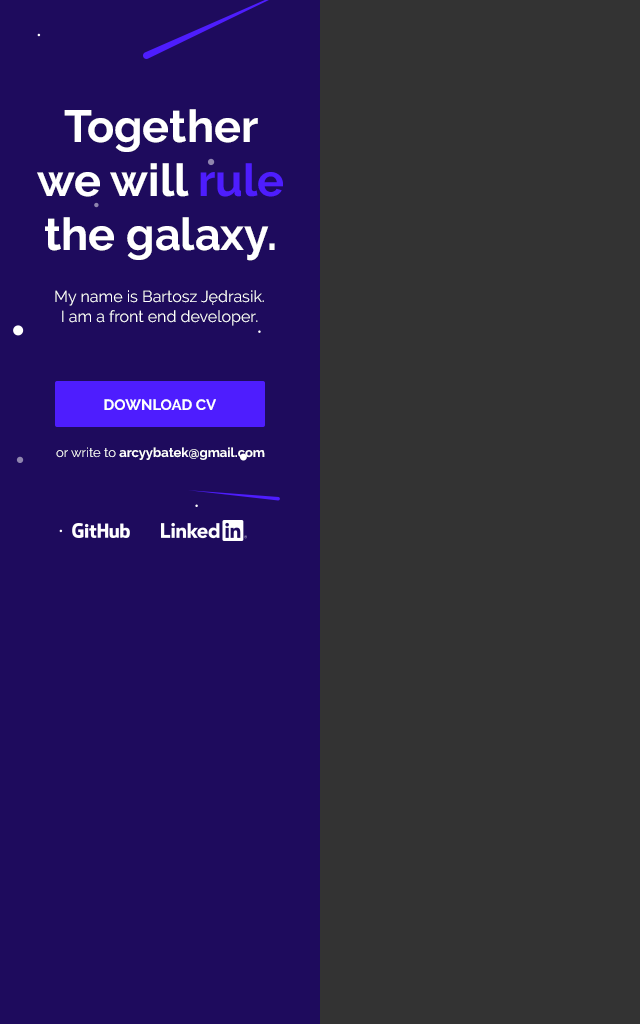
<style>
.page{position:relative;width:640px;height:1024px;background:#333333}
.page>*{position:absolute;margin:0}
.t1{font:45px "Raleway-Bold";color:#ffffff}
.t2{font:45px "Raleway-Bold";color:#4e1dfe}
.t3{font:16px/20px "Raleway";color:#ffffff}
.t4{font:15px "Raleway-Bold";color:#ffffff;text-transform:uppercase}
.t5{font:13px "Raleway-Bold";color:#ffffff}
.t6{font:13px "Raleway";color:#ffffff}
</style>
<div class="page">
<p class="t1" style="left:37px;top:109px;width:246px;height:152px;text-align:center">Together<br>we will <span class="t2">rule</span><br>the galaxy.</p>
<p class="t3" style="left:55px;top:290px;width:209px;height:36px;text-align:center">My name is Bartosz Jędrasik.<br>I am a front end developer.</p>
<p class="t4" style="left:104px;top:399px;width:112px;height:11px">Download CV</p>
<p class="t5" style="left:56px;top:447px;width:209px;height:13px"><span class="t6">or write to </span>arcyybatek@gmail.com</p>
</div>
